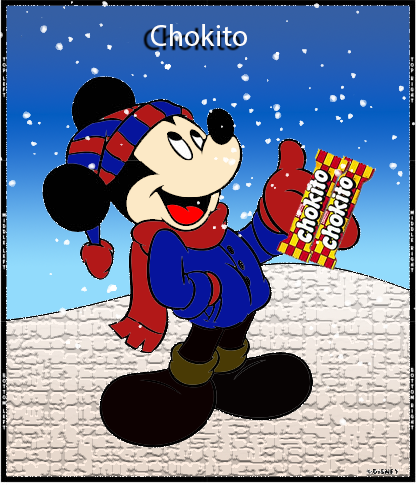
<style>
.page{position:relative;width:419px;height:485px}
.page>*{position:absolute;margin:0}
.t1{font:30px "MyriadPro-Regular";color:#fcfcfc}
</style>
<div class="page">
<p class="t1" style="left:151px;top:24px;width:96px;height:22px">Chokito</p>
</div>
